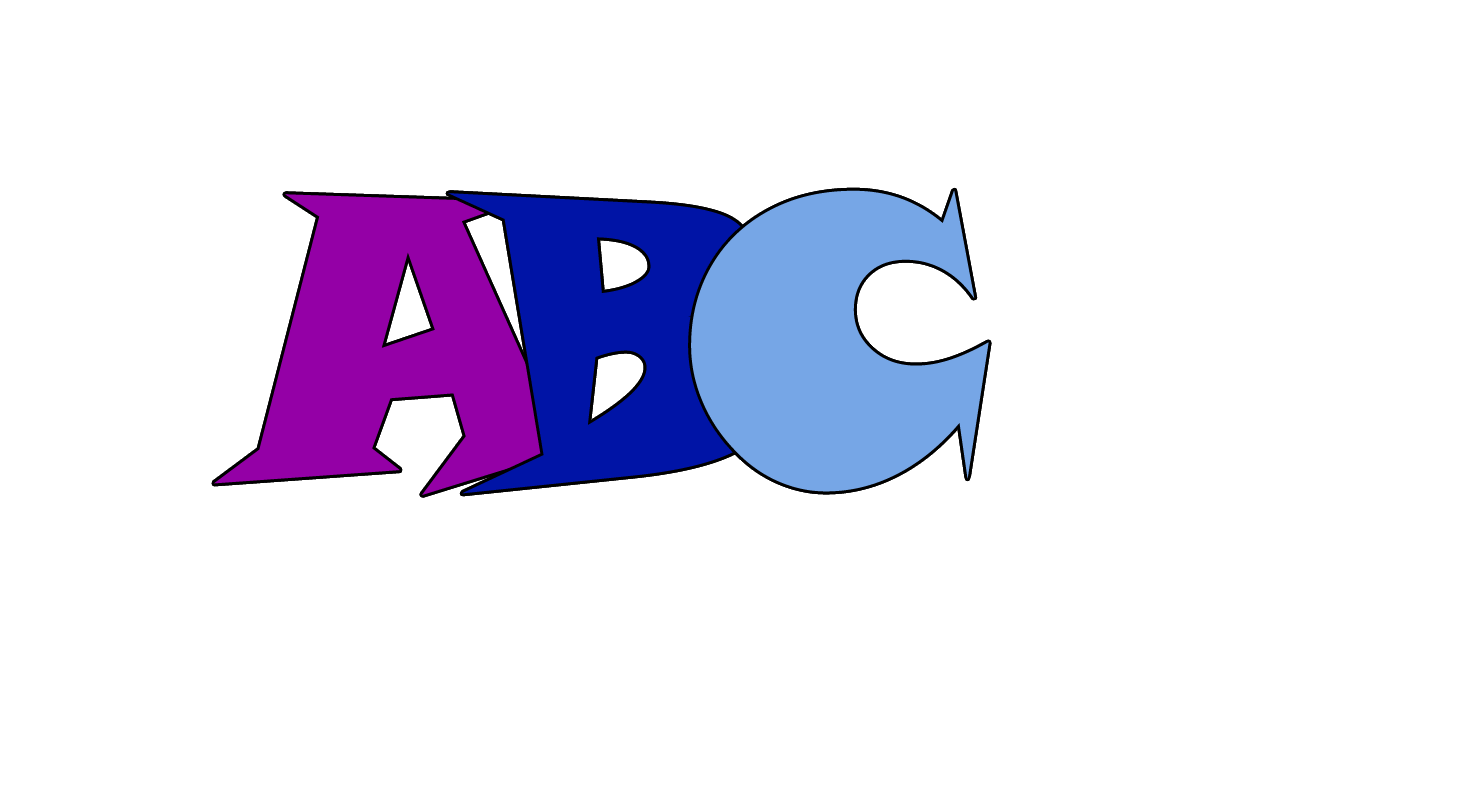
<style>
.page{position:relative;width:1472px;height:806px;background:#ffffff}
.page>*{position:absolute;margin:0}
.t1{font:400px "SnapITC-Regular";color:#9400a6}
.t2{font:400px "SnapITC-Regular";color:#0014a6}
.t3{font:400px "SnapITC-Regular";color:#76a6e6}
</style>
<div class="page">
<p class="t1" style="left:214px;top:194px;width:379px;height:301px">A</p>
<p class="t2" style="left:448px;top:193px;width:330px;height:301px">B</p>
<p class="t3" style="left:691px;top:190px;width:298px;height:302px">C</p>
</div>
